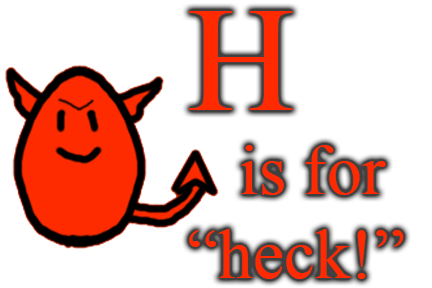
<style>
.page{position:relative;width:432px;height:288px;background:#ffffff}
.page>*{position:absolute;margin:0}
.t1{font:70px "TimesNewRomanPSMT";color:#ff2a00}
.t2{font:150px "TimesNewRomanPSMT";color:#ff2a00}
</style>
<div class="page">
<p class="t1" style="left:189px;top:11px;width:215px;height:268px"><span class="t2">H<br>        </span>is for “heck!”</p>
</div>
